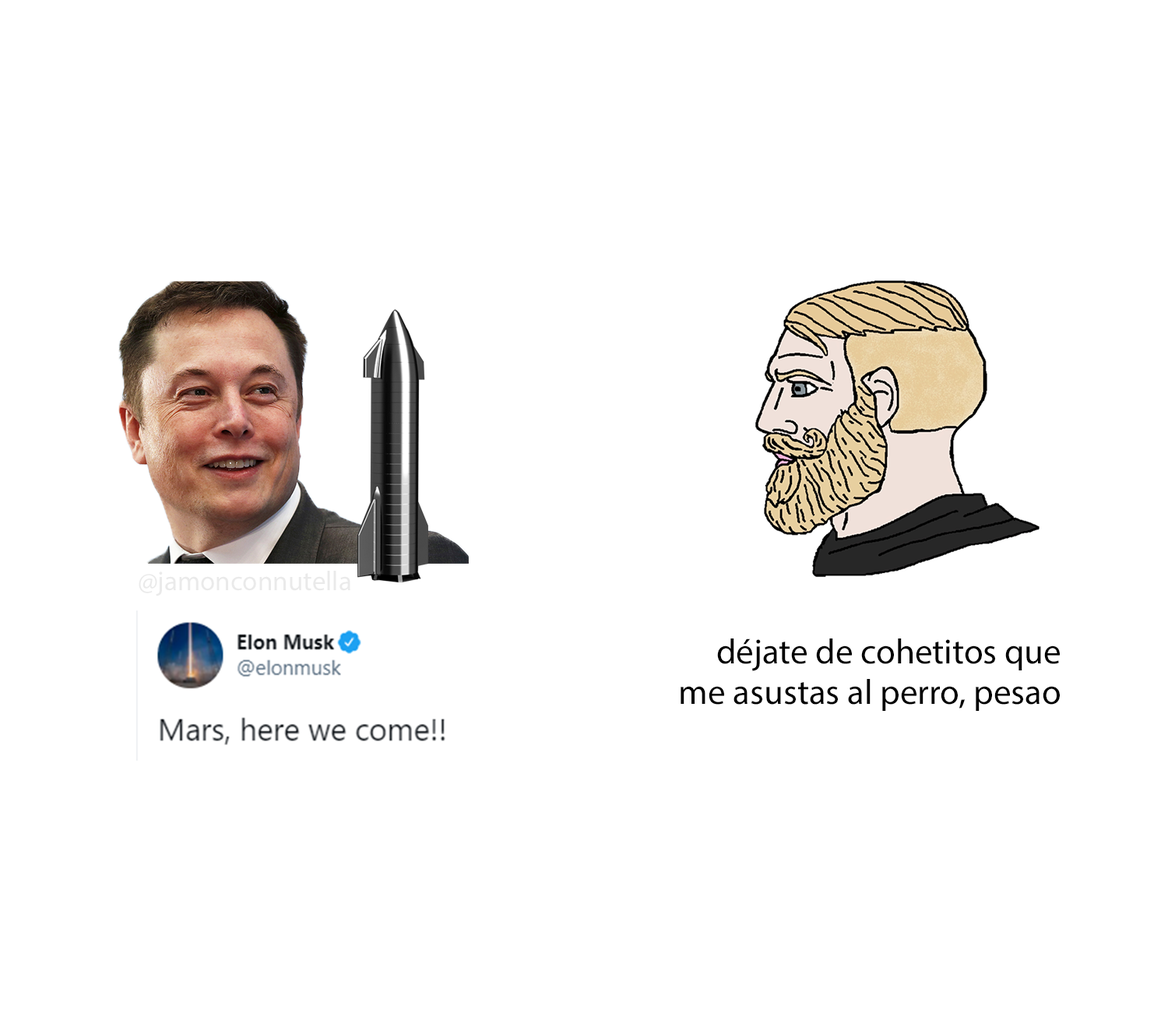
<style>
.page{position:relative;width:1168px;height:1020px;background:#ffffff}
.page>*{position:absolute;margin:0}
.t1{font:27.4px "MyriadPro-Regular";color:#eaeaea}
.t2{font:35.2px "MyriadPro-Regular";color:#000000}
</style>
<div class="page">
<p class="t1" style="left:139px;top:571px;width:212px;height:26px">@jamonconnutella</p>
<p class="t2" style="left:681px;top:639px;width:379px;height:72px;text-align:right">déjate de cohetitos que<br>me asustas al perro, pesao</p>
</div>
